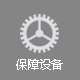
<style>
.page{position:relative;width:80px;height:80px;background:#868585}
.page>*{position:absolute;margin:0}
.t1{font:12px "MicrosoftYaHei";color:#ffffff}
</style>
<div class="page">
<p class="t1" style="left:16px;top:59px;width:47px;height:11px">保障设备</p>
</div>
